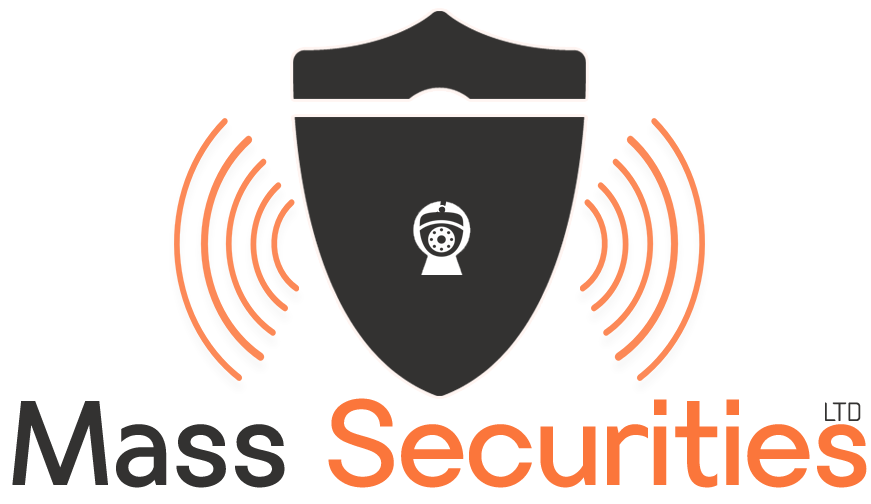
<style>
.page{position:relative;width:871px;height:504px;background:#ffffff}
.page>*{position:absolute;margin:0}
.t1{font:116.7px "Villeray-Regular";color:#fb763b}
.t2{font:116.7px "Villeray-Regular";color:#333231}
.t3{font:25px "cuyabra-Regular";color:#333231}
</style>
<div class="page">
<p class="t1" style="left:12px;top:398px;width:855px;height:90px"><span class="t2">Mass </span>Securities</p>
<p class="t3" style="left:825px;top:402px;width:36px;height:19px">LTD</p>
</div>
